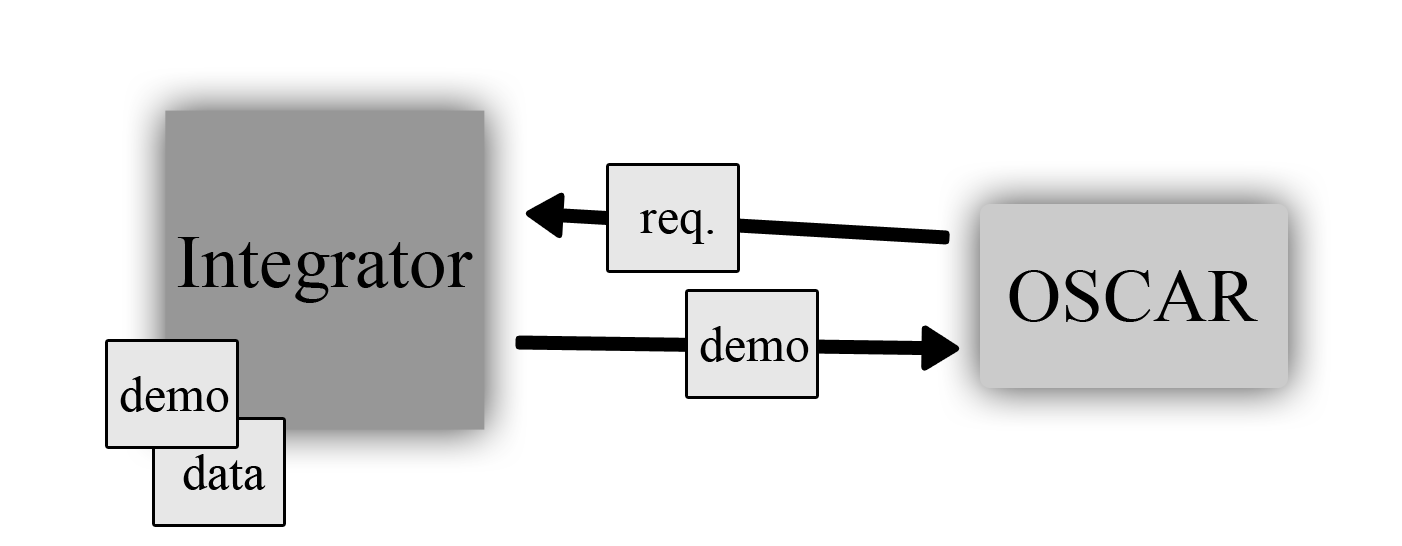
<style>
.page{position:relative;width:1402px;height:546px;background:#ffffff}
.page>*{position:absolute;margin:0}
.t1{font:50px "TimesNewRomanPSMT";color:#000000}
.t2{font:75px "TimesNewRomanPSMT";color:#000000}
</style>
<div class="page">
<p class="t1" style="left:640px;top:210px;width:73px;height:34px">req.</p>
<p class="t2" style="left:177px;top:237px;width:296px;height:66px">Integrator</p>
<p class="t2" style="left:1009px;top:270px;width:249px;height:52px">OSCAR</p>
<p class="t1" style="left:700px;top:326px;width:109px;height:36px">demo</p>
<p class="t1" style="left:120px;top:376px;width:109px;height:36px">demo</p>
<p class="t1" style="left:183px;top:454px;width:83px;height:36px">data</p>
</div>
